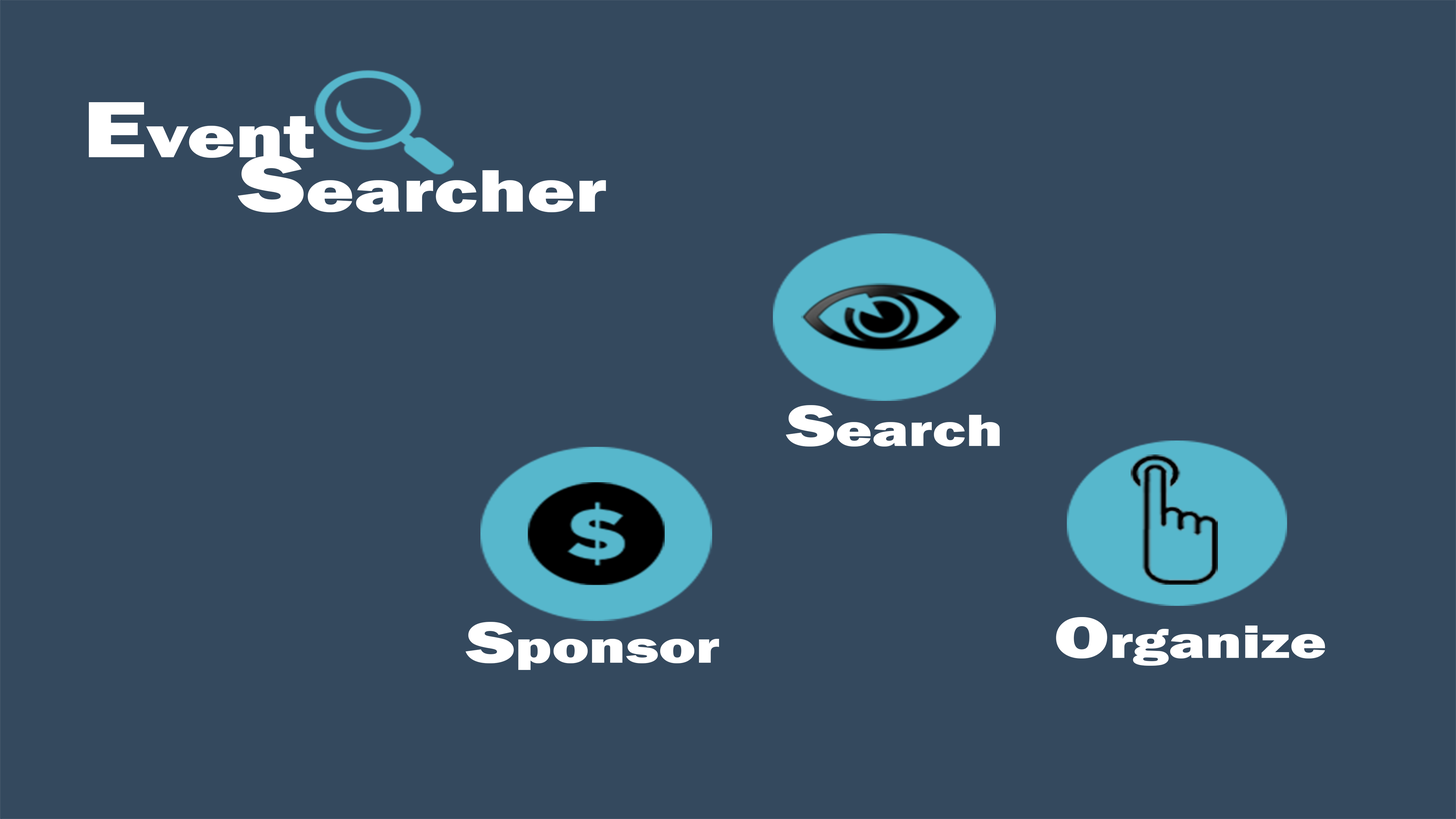
<style>
.page{position:relative;width:1456px;height:819px;background:#34495e}
.page>*{position:absolute;margin:0}
.t1{font:61.9px "FranklinGothic-Heavy";color:#ffffff;scale:1.33 1}
.t2{font:82.5px "FranklinGothic-Heavy";color:#ffffff;scale:1.33 1}
.t3{font:46.8px "FranklinGothic-Heavy";color:#ffffff;scale:1.33 1}
.t4{font:60.2px "FranklinGothic-Heavy";color:#ffffff;scale:1.33 1}
</style>
<div class="page">
<p class="t1" style="left:89px;top:102px;width:225px;height:56px"><span class="t2">E</span>vent</p>
<p class="t1" style="left:238px;top:156px;width:368px;height:56px"><span class="t2">S</span>earcher</p>
<p class="t3" style="left:786px;top:405px;width:214px;height:41px"><span class="t4">S</span>earch</p>
<p class="t3" style="left:1056px;top:617px;width:270px;height:49px"><span class="t4">O</span>rganize</p>
<p class="t3" style="left:466px;top:622px;width:253px;height:48px"><span class="t4">S</span>ponsor</p>
</div>
